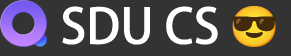
<style>
.page{position:relative;width:291px;height:56px;background:#333333}
.page>*{position:absolute;margin:0}
.t1{font:48px "AdobeHeitiStd-Regular";color:#ffffff}
</style>
<div class="page">
<p class="t1" style="left:62px;top:6px;width:156px;height:39px">SDU CS</p>
</div>
